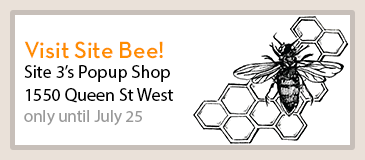
<style>
.page{position:relative;width:365px;height:160px;background:#ffffff}
.page>*{position:absolute;margin:0}
.t1{font:24px "NeutraTextTF-Demi";color:#ff8d00}
.t2{font:18px/23px "MyriadPro-Regular";color:#000000}
.t3{font:17px "MyriadPro-Regular";color:#999999}
</style>
<div class="page">
<p class="t1" style="left:24px;top:41px;width:139px;height:18px">Visit Site Bee!</p>
<p class="t2" style="left:24px;top:65px;width:150px;height:38px">Site 3’s Popup Shop<br>1550 Queen St West</p>
<p class="t3" style="left:24px;top:110px;width:118px;height:16px">only until July 25</p>
</div>
